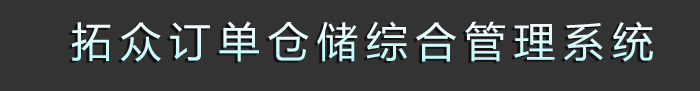
<style>
.page{position:relative;width:700px;height:91px;background:#333333}
.page>*{position:absolute;margin:0}
.t1{font:41px "MicrosoftYaHei";letter-spacing:0.2em}
</style>
<div class="page">
<p class="t1" style="left:71px;top:21px;width:582px;height:41px">拓众订单仓储综合管理系统</p>
</div>
